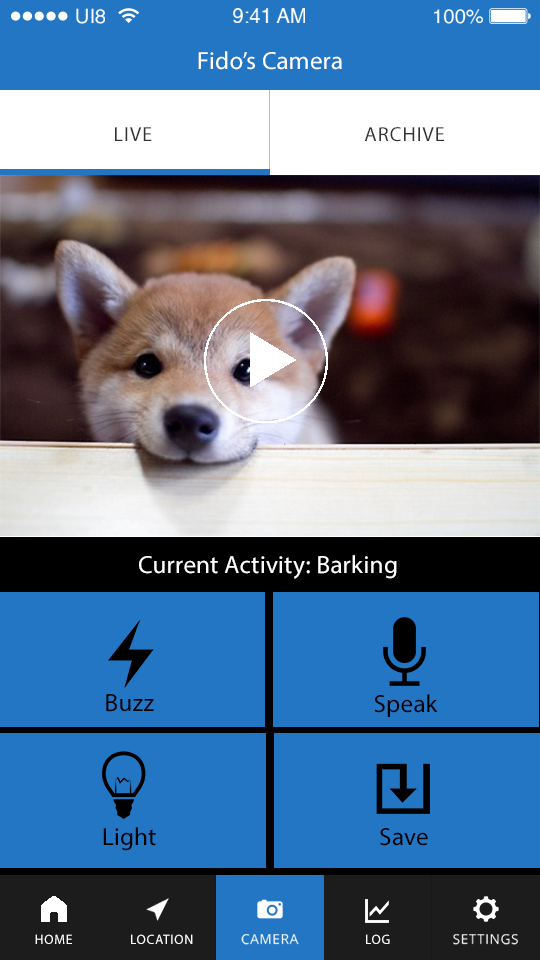
<style>
.page{position:relative;width:540px;height:960px;background:#2376c4}
.page>*{position:absolute;margin:0}
.t1{font:19.8px "Helvetica";color:#ffffff}
.t2{font:25px "MyriadPro-Regular";letter-spacing:0.01em;color:#ffffff}
.t3{font:20.4px "MyriadPro-Regular";letter-spacing:0.05em;color:#333333;text-transform:uppercase}
.t4{font:25px "MyriadPro-Regular";letter-spacing:0.01em;color:#000000}
.t5{font:13.6px "MyriadPro-Regular";letter-spacing:0.05em;color:#ffffff;text-transform:uppercase}
.t6{font:13.6px "OpenSans";letter-spacing:0.05em;color:#ffffff;text-transform:uppercase}
</style>
<div class="page">
<p class="t1" style="left:76px;top:8px;width:29px;height:16px">UI8</p>
<p class="t1" style="left:233px;top:8px;width:72px;height:15px">9:41 AM</p>
<p class="t1" style="left:434px;top:9px;width:49px;height:15px">100%</p>
<p class="t2" style="left:198px;top:51px;width:144px;height:19px">Fido’s Camera</p>
<p class="t3" style="left:115px;top:127px;width:37px;height:14px">LIVE</p>
<p class="t3" style="left:364px;top:127px;width:80px;height:15px">ARCHIVE</p>
<p class="t2" style="left:139px;top:555px;width:258px;height:24px">Current Activity: Barking</p>
<p class="t4" style="left:106px;top:694px;width:48px;height:18px">Buzz</p>
<p class="t4" style="left:374px;top:694px;width:64px;height:23px">Speak</p>
<p class="t4" style="left:103px;top:827px;width:53px;height:24px">Light</p>
<p class="t4" style="left:380px;top:828px;width:48px;height:18px">Save</p>
<p class="t5" style="left:35px;top:934px;width:37px;height:10px">home</p>
<p class="t5" style="left:131px;top:934px;width:62px;height:10px">LOCATION</p>
<p class="t6" style="left:241px;top:934px;width:58px;height:11px">camera</p>
<p class="t5" style="left:366px;top:934px;width:24px;height:10px">LOG</p>
<p class="t6" style="left:453px;top:934px;width:65px;height:11px">settings</p>
</div>
